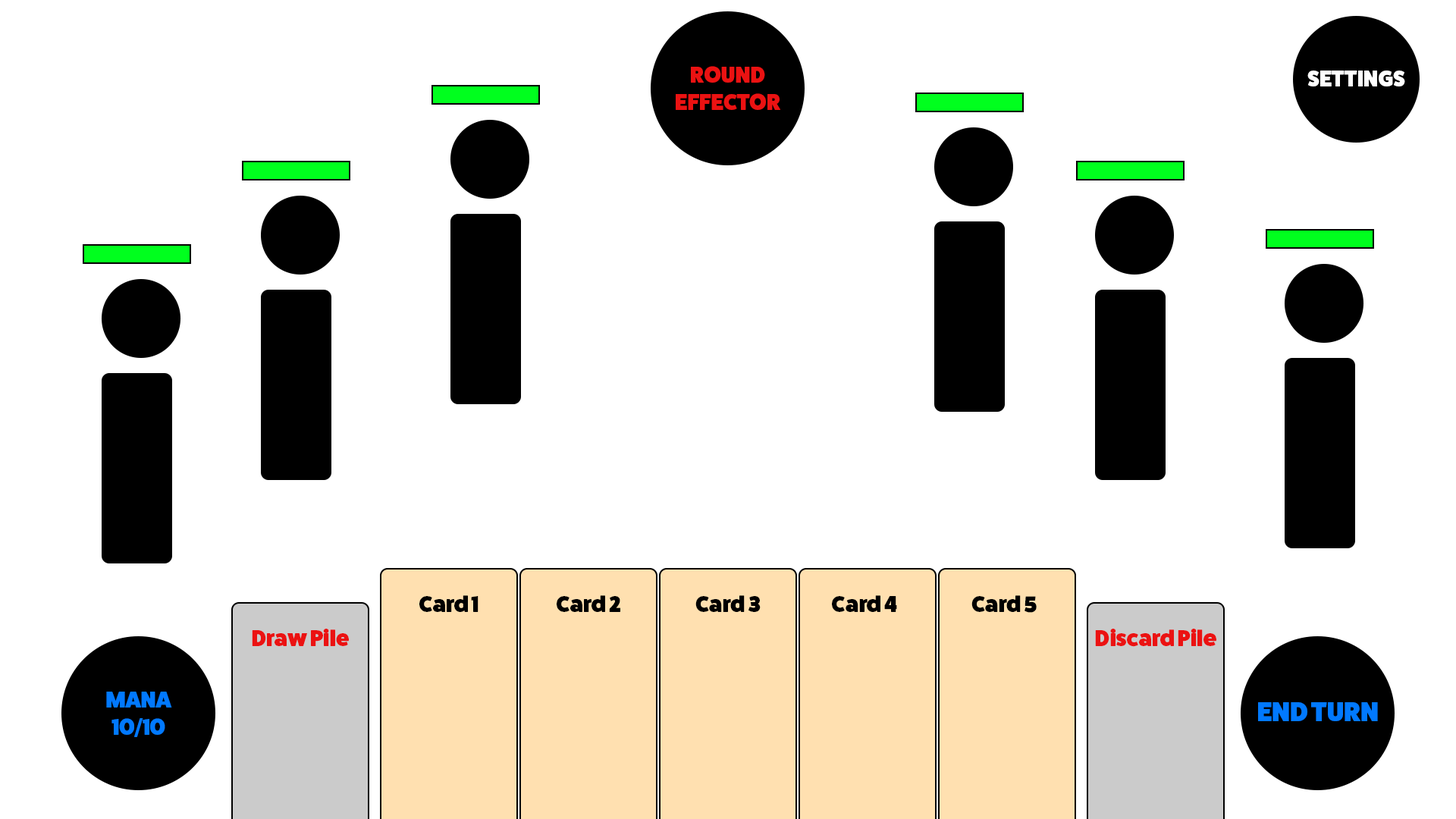
<style>
.page{position:relative;width:1456px;height:819px;background:#ffffff}
.page>*{position:absolute;margin:0}
.t1{font:22.7px "FatFrank-Heavy";color:#eb1212}
.t2{font:22.5px "FatFrank-Heavy";color:#ffffff}
.t3{font:22.7px "FatFrank-Heavy";color:#000000}
.t4{font:22.7px "FatFrank-Heavy";color:#0179ff}
.t5{font:27.3px "FatFrank-Heavy";color:#0179ff}
</style>
<div class="page">
<p class="t1" style="left:676px;top:66px;width:104px;height:44px;text-align:center">ROUND EFFECTOR</p>
<p class="t2" style="left:1307px;top:71px;width:98px;height:15px">SETTINGS</p>
<p class="t3" style="left:419px;top:595px;width:60px;height:17px"><span class="t1"><br></span>Card 1</p>
<p class="t3" style="left:557px;top:595px;width:63px;height:17px"><span class="t1"><br></span>Card 2</p>
<p class="t3" style="left:695px;top:595px;width:66px;height:17px"><span class="t1"><br></span>Card 3</p>
<p class="t3" style="left:832px;top:595px;width:65px;height:17px"><span class="t1"><br></span>Card 4</p>
<p class="t3" style="left:971px;top:595px;width:66px;height:18px"><span class="t1"><br></span>Card 5</p>
<p class="t1" style="left:252px;top:629px;width:97px;height:17px">Draw Pile</p>
<p class="t1" style="left:1095px;top:629px;width:121px;height:18px">Discard Pile</p>
<p class="t4" style="left:106px;top:692px;width:66px;height:45px;text-align:center">MANA<br>10/10</p>
<p class="t5" style="left:1258px;top:702px;width:120px;height:19px">END TURN</p>
</div>
